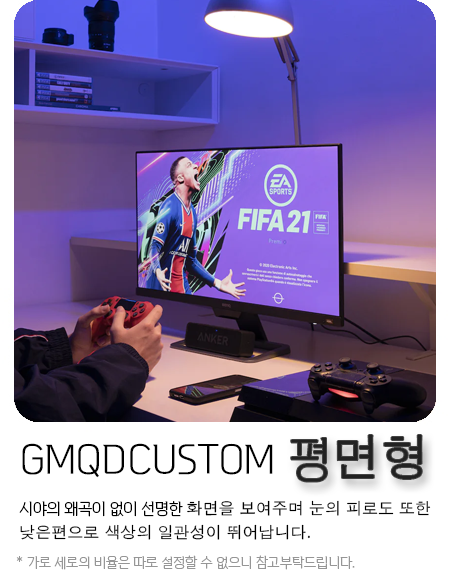
<style>
.page{position:relative;width:450px;height:576px;background:#ffffff}
.page>*{position:absolute;margin:0}
.t1{font:48.9px "AppleGothic";color:#222222}
.t2{font:48.9px "VITRO-PRIDE-OTF";color:#222222}
.t3{font:39.5px "VITRO-PRIDE-OTF";color:#000000}
.t4{font:16px/24px "AppleGothic";color:#000000}
.t5{font:16px/24px "VITRO-PRIDE-OTF";color:#000000}
.t6{font:14px "VITRO-PRIDE-OTF";color:#969696}
</style>
<div class="page">
<p class="t1" style="left:291px;top:435px;width:131px;height:47px"><span class="t2">평</span>면형</p>
<p class="t3" style="left:22px;top:443px;width:251px;height:35px">GMQD CUSTOM</p>
<p class="t4" style="left:19px;top:500px;width:412px;height:40px"><span class="t5">시야의 왜곡이 없이 선명한 </span>화면을 보여주며 눈의 피로도 또한<br>낮은편으로 색상의 일관성이 뛰어납니다.</p>
<p class="t6" style="left:16px;top:555px;width:339px;height:15px">* 가로 세로의 비율은 따로 설정할 수 없으니 참고부탁드립니다.</p>
</div>
